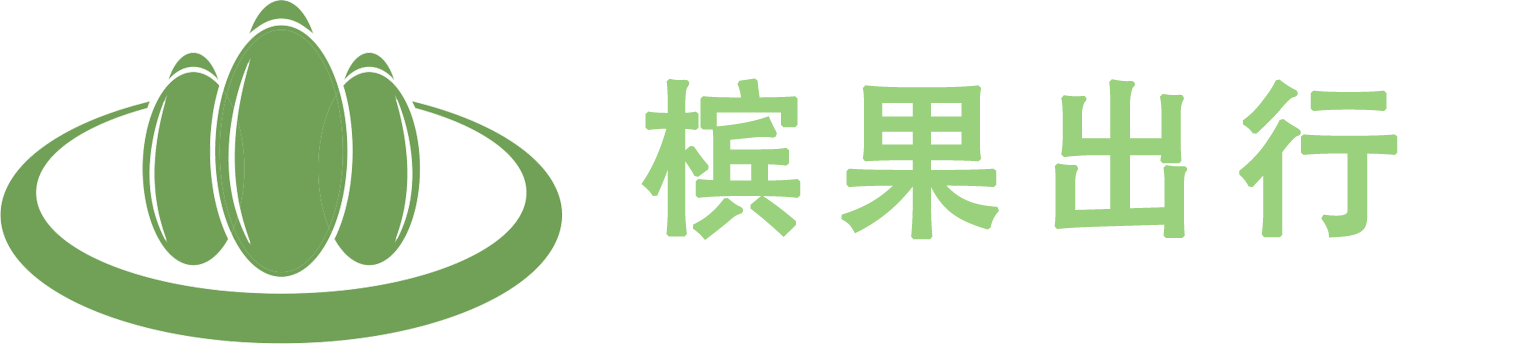
<style>
.page{position:relative;width:1530px;height:344px;background:#ffffff}
.page>*{position:absolute;margin:0}
.t1{font:170.4px "AdobeHeitiStd-Regular";letter-spacing:0.14em;color:#9ad17c;font-weight:bold}
</style>
<div class="page">
<p class="t1" style="left:641px;top:78px;width:757px;height:162px">槟果出行</p>
</div>
